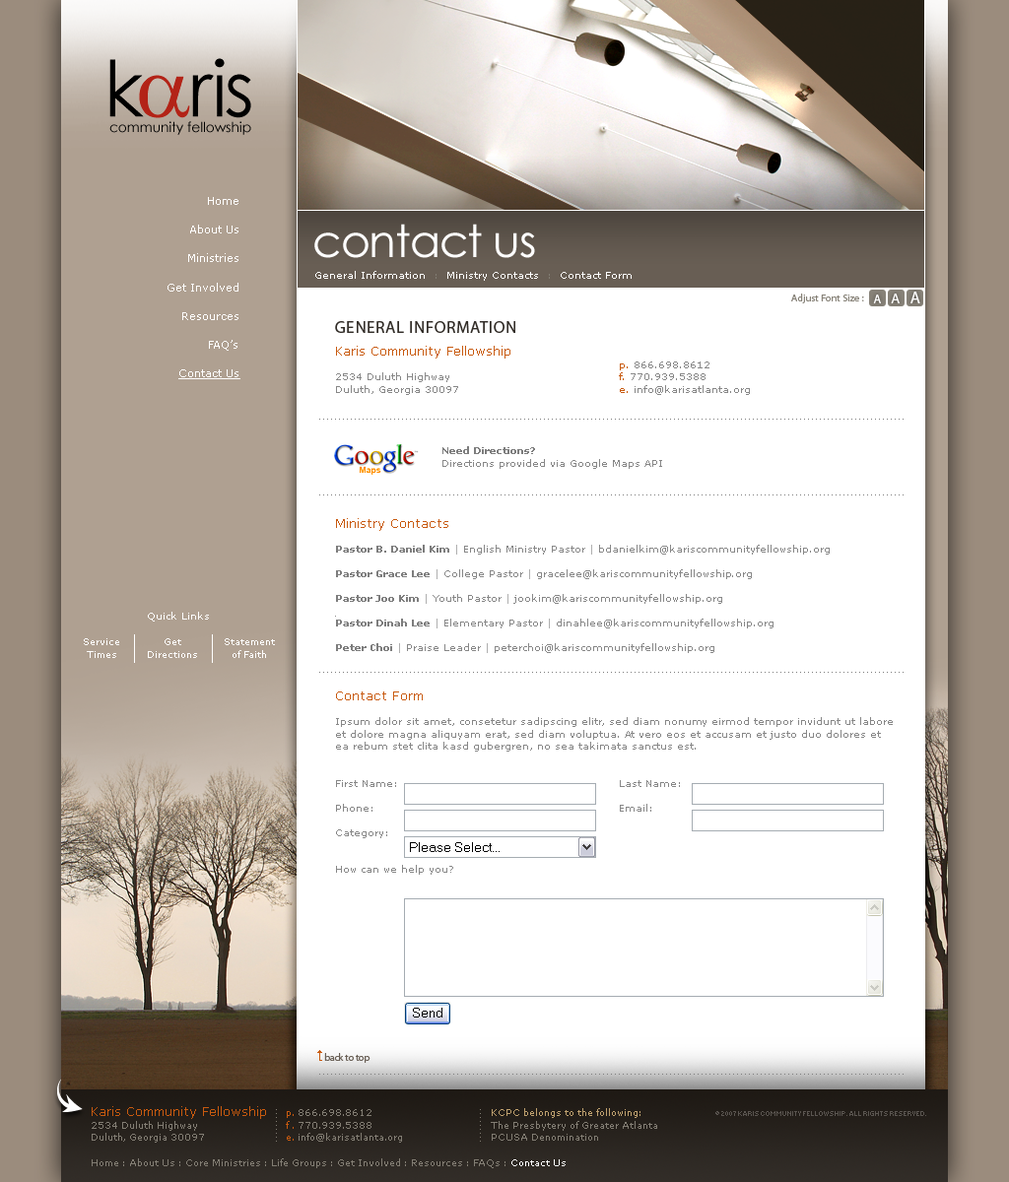
<style>
.page{position:relative;width:1009px;height:1182px;background:#ffffff}
.page>*{position:absolute;margin:0}
.t1{font:11.3px/28.7px "Verdana";color:#ffffff}
.t2{font:11.3px/28.7px "Verdana";color:#ffffff;text-decoration:underline}
.t3{font:45.1px "CenturyGothic";letter-spacing:-0.025em;color:#ffffff}
.t4{font:10.3px "Verdana";color:#ffffff}
.t5{font:10.3px "Verdana";color:#827d73}
.t6{font:10.3px "MyriadPro-Regular";color:#878278}
.t7{font:12.3px "MyriadPro-Regular";letter-spacing:0.02em;color:#ffffff}
.t8{font:14.4px "MyriadPro-Regular";letter-spacing:0.02em;color:#ffffff}
.t9{font:16.4px "MyriadPro-Regular";letter-spacing:0.02em;color:#ffffff}
.t10{font:16.4px "MyriadPro-Regular";letter-spacing:0.05em;color:#322d28;text-transform:uppercase}
.t11{font:10.3px/12.3px "Verdana";color:#878787}
.t12{font:12.3px/12.3px "Verdana";color:#c85a0f}
.t13{font:10.3px/12.3px "Verdana";color:#c85a0f}
.t14{font:10.3px/12.3px "Verdana-Bold";color:#7d7d7d}
.t15{font:10.3px/12.3px "Verdana";color:#afafaf}
.t16{font:9.2px/12.3px "Verdana";color:#ffffff}
.t17{font:10.3px "MyriadPro-Regular";letter-spacing:-0.025em;color:#695f55}
.t18{font:9.2px/12.3px "Verdana";color:#827d73}
.t19{font:9.2px/12.3px "Verdana";color:#c85a0f}
.t20{font:9.2px/12.3px "Verdana";color:#bea06e}
.t21{font:7.2px "Small Fonts";color:#5a5550;text-transform:uppercase}
.t22{font:9.2px "Verdana";color:#827d73}
.t23{font:9.2px "Verdana";color:#ffffff}
</style>
<div class="page">
<p class="t1" style="left:167px;top:197px;width:73px;height:182px;text-align:right">Home<br>About Us<br>Ministries<br>Get Involved<br>Resources<br>FAQ’s<br><span class="t2">Contact Us</span></p>
<p class="t3" style="left:314px;top:224px;width:221px;height:34px">contact us</p>
<p class="t4" style="left:315px;top:271px;width:316px;height:10px">General Information<span class="t5">  :  </span>Ministry Contacts<span class="t5">  :  </span>Contact Form</p>
<p class="t6" style="left:791px;top:294px;width:73px;height:9px">Adjust Font Size :</p>
<p class="t7" style="left:873px;top:292px;width:47px;height:11px">A<span class="t8">   A   </span><span class="t9">A</span></p>
<p class="t10" style="left:335px;top:321px;width:180px;height:12px">general information</p>
<p class="t11" style="left:335px;top:346px;width:557px;height:529px"><span class="t12">Karis Community Fellowship<br>        </span><span class="t13">p.</span> 866.698.8612<br>2534 Duluth Highway     <span class="t13">f.</span> 770.939.5388<br>Duluth, Georgia 30097     <span class="t13">e.</span> info@karisatlanta.org<br><br><br><br><br><span class="t14">   Need Directions?<br></span>   Directions provided via Google Maps API<br><br><br><br><br><span class="t12">Ministry Contacts<br><br></span><span class="t14">Pastor B. Daniel Kim </span><span class="t15">|</span> English Ministry Pastor <span class="t15">|</span> bdanielkim@kariscommunityfellowship.org<br><br><span class="t14">Pastor Grace Lee </span><span class="t15">|</span> College Pastor <span class="t15">|</span> gracelee@kariscommunityfellowship.org<br><br><span class="t14">Pastor Joo Kim </span><span class="t15">|</span> Youth Pastor <span class="t15">|</span> jookim@kariscommunityfellowship.org<br><br><span class="t14">Pastor Dinah Lee </span><span class="t15">|</span> Elementary Pastor <span class="t15">|</span> dinahlee@kariscommunityfellowship.org<br><br><span class="t14">Peter Choi </span><span class="t15">|</span> Praise Leader <span class="t15">|</span> peterchoi@kariscommunityfellowship.org<br><br><br><br><span class="t12">Contact Form<br><br></span>Ipsum dolor sit amet, consetetur sadipscing elitr, sed diam nonumy eirmod tempor invidunt ut labore et dolore magna aliquyam erat, sed diam voluptua. At vero eos et accusam et justo duo dolores et ea rebum stet clita kasd gubergren, no sea takimata sanctus est.<br><br><br>First Name:       Last Name:<br><br>Phone:       Email:<br><br>Category:<br><br><br>How can we help you?</p>
<p class="t4" style="left:148px;top:612px;width:61px;height:10px">Quick Links</p>
<p class="t16" style="left:84px;top:638px;width:35px;height:20px;text-align:center">Service<br>Times</p>
<p class="t16" style="left:148px;top:638px;width:49px;height:20px;text-align:center">Get<br>Directions</p>
<p class="t16" style="left:225px;top:638px;width:50px;height:20px;text-align:center">Statement<br>of Faith</p>
<p class="t17" style="left:324px;top:1053px;width:46px;height:10px">back to top</p>
<p class="t18" style="left:92px;top:1106px;width:174px;height:37px"><span class="t12">Karis Community Fellowship<br></span>2534 Duluth Highway<br>Duluth, Georgia 30097</p>
<p class="t18" style="left:286px;top:1109px;width:116px;height:34px"><span class="t19">p.</span> 866.698.8612<br><span class="t19">f .</span> 770.939.5388<br><span class="t19">e.</span> info@karisatlanta.org</p>
<p class="t18" style="left:491px;top:1108px;width:166px;height:33px"><span class="t20">KCPC belongs to the following:<br></span>The Presbytery of Greater Atlanta<br>PCUSA Denomination</p>
<p class="t21" style="left:715px;top:1111px;width:211px;height:5px">© 2007 karis community fellowship. All rights reserved.</p>
<p class="t22" style="left:92px;top:1158px;width:473px;height:10px">Home : About Us : Core Ministries : Life Groups : Get Involved : Resources : FAQs : <span class="t23">Contact Us</span></p>
</div>
